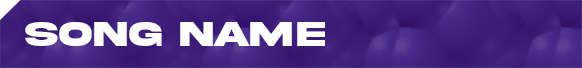
<style>
.page{position:relative;width:582px;height:68px}
.page>*{position:absolute;margin:0}
.t1{font:36px "AkiraExpanded-SuperBold";color:#ffffff}
</style>
<div class="page">
<p class="t1" style="left:25px;top:22px;width:300px;height:24px">SONG NAME</p>
</div>
